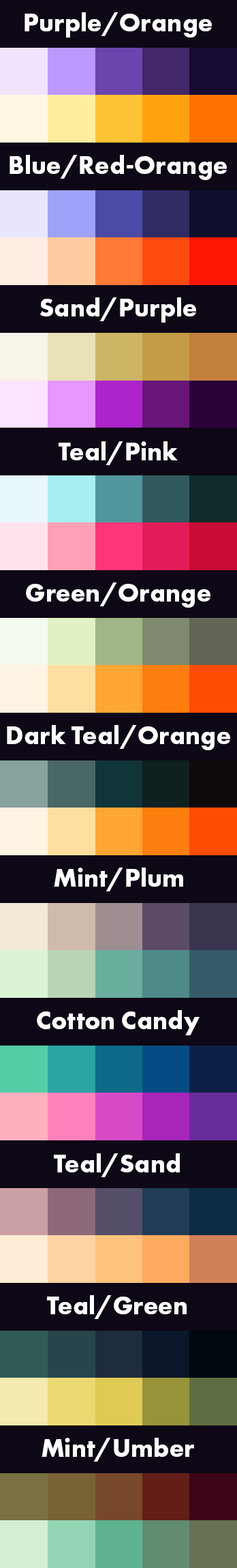
<style>
.page{position:relative;width:237px;height:1568px;background:#0e0715}
.page>*{position:absolute;margin:0}
.t1{font:25.9px "FuturaPT-Bold";color:#ffffff}
</style>
<div class="page">
<p class="t1" style="left:25px;top:12px;width:187px;height:26px">Purple/Orange</p>
<p class="t1" style="left:10px;top:155px;width:217px;height:25px">Blue/Red-Orange</p>
<p class="t1" style="left:40px;top:297px;width:156px;height:26px">Sand/Purple</p>
<p class="t1" style="left:59px;top:441px;width:119px;height:24px">Teal/Pink</p>
<p class="t1" style="left:26px;top:582px;width:185px;height:26px">Green/Orange</p>
<p class="t1" style="left:7px;top:725px;width:224px;height:25px">Dark Teal/Orange</p>
<p class="t1" style="left:54px;top:868px;width:129px;height:23px">Mint/Plum</p>
<p class="t1" style="left:37px;top:1010px;width:163px;height:25px">Cotton Candy</p>
<p class="t1" style="left:54px;top:1153px;width:126px;height:24px">Teal/Sand</p>
<p class="t1" style="left:47px;top:1295px;width:140px;height:24px">Teal/Green</p>
<p class="t1" style="left:42px;top:1438px;width:152px;height:24px">Mint/Umber</p>
</div>
